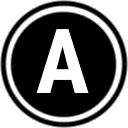
<style>
.page{position:relative;width:128px;height:128px;background:#000000}
.page>*{position:absolute;margin:0}
.t1{font:90px "RobotoCondensed-Bold";color:#ffffff}
</style>
<div class="page">
<p class="t1" style="left:36px;top:29px;width:53px;height:64px">A</p>
</div>
